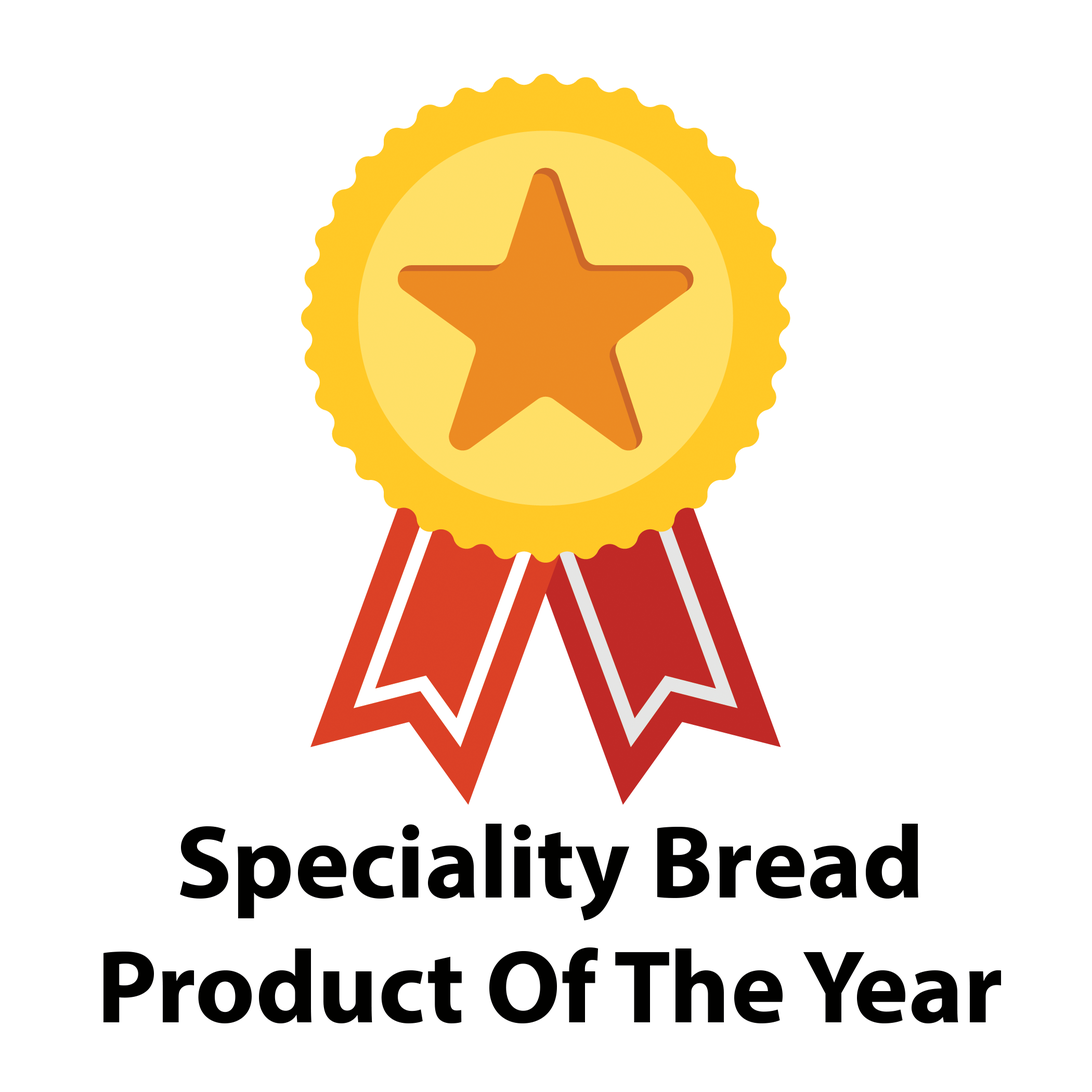
<style>
.page{position:relative;width:1092px;height:1092px;background:#ffffff}
.page>*{position:absolute;margin:0}
.t1{font:104px "MyriadPro-Bold";color:#010100}
</style>
<div class="page">
<p class="t1" style="left:103px;top:824px;width:899px;height:200px;text-align:center">Speciality Bread <br>Product Of The Year</p>
</div>
